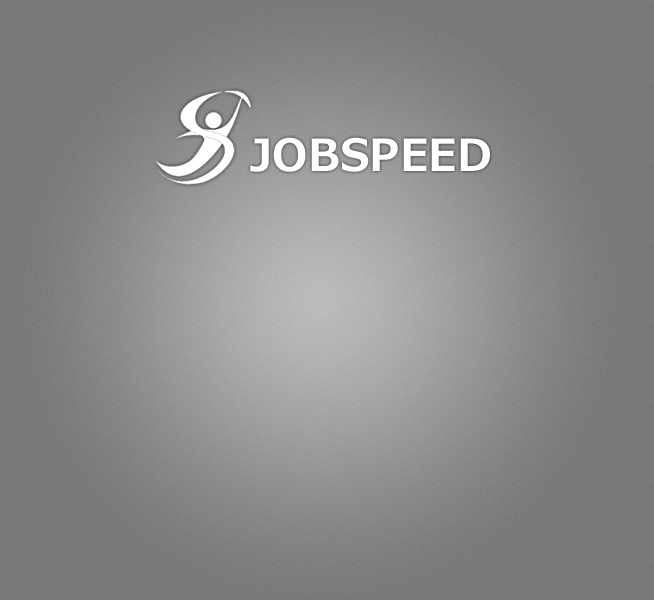
<style>
.page{position:relative;width:654px;height:600px}
.page>*{position:absolute;margin:0}
.t1{font:44px "MeiryoUI-Bold";color:#ffffff}
</style>
<div class="page">
<p class="t1" style="left:250px;top:137px;width:240px;height:35px">JOBSPEED</p>
</div>
